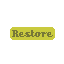
<style>
.page{position:relative;width:64px;height:64px;background:#ffffff}
.page>*{position:absolute;margin:0}
.t1{font:10px "Superscript";color:#777837}
</style>
<div class="page">
<p class="t1" style="left:12px;top:30px;width:41px;height:7px">Restore</p>
</div>
